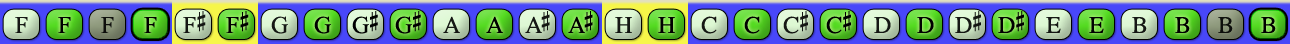
<style>
.page{position:relative;width:1290px;height:44px}
.page>*{position:absolute;margin:0}
.t1{font:24px "OpusChords";color:#000000}
.t2{font:24px "OpusChords";letter-spacing:-0.025em;color:#000000}
.t3{font:24px "OpusChords";letter-spacing:-0.1em;color:#000000}
</style>
<div class="page">
<p class="t1" style="left:15px;top:17px;width:13px;height:16px;opacity:0.9">F</p>
<p class="t1" style="left:58px;top:17px;width:13px;height:16px">F</p>
<p class="t1" style="left:101px;top:17px;width:13px;height:16px;opacity:0.9">F</p>
<p class="t1" style="left:144px;top:17px;width:13px;height:16px">F</p>
<p class="t1" style="left:183px;top:11px;width:23px;height:22px;opacity:0.9">F#</p>
<p class="t1" style="left:226px;top:11px;width:23px;height:22px">F#</p>
<p class="t1" style="left:271px;top:16px;width:17px;height:18px;opacity:0.9">G</p>
<p class="t1" style="left:314px;top:16px;width:17px;height:18px">G</p>
<p class="t2" style="left:352px;top:11px;width:26px;height:23px">G#</p>
<p class="t2" style="left:395px;top:11px;width:26px;height:23px">G#</p>
<p class="t1" style="left:443px;top:16px;width:17px;height:17px;opacity:0.9">A</p>
<p class="t1" style="left:486px;top:16px;width:17px;height:17px">A</p>
<p class="t3" style="left:525px;top:11px;width:25px;height:22px;opacity:0.9">A#</p>
<p class="t3" style="left:568px;top:11px;width:25px;height:22px">A#</p>
<p class="t1" style="left:615px;top:17px;width:17px;height:16px;opacity:0.9">H</p>
<p class="t1" style="left:658px;top:17px;width:17px;height:16px">H</p>
<p class="t1" style="left:701px;top:16px;width:16px;height:18px;opacity:0.9">C</p>
<p class="t1" style="left:744px;top:16px;width:16px;height:18px">C</p>
<p class="t1" style="left:783px;top:11px;width:25px;height:23px;opacity:0.9">C#</p>
<p class="t1" style="left:826px;top:11px;width:25px;height:23px">C#</p>
<p class="t1" style="left:874px;top:17px;width:17px;height:16px;opacity:0.9">D</p>
<p class="t1" style="left:917px;top:17px;width:17px;height:16px">D</p>
<p class="t2" style="left:955px;top:11px;width:26px;height:22px;opacity:0.9">D#</p>
<p class="t2" style="left:998px;top:11px;width:26px;height:22px">D#</p>
<p class="t1" style="left:1046px;top:17px;width:15px;height:16px;opacity:0.9">E</p>
<p class="t1" style="left:1089px;top:17px;width:15px;height:16px">E</p>
<p class="t1" style="left:1132px;top:17px;width:15px;height:16px;opacity:0.9">B</p>
<p class="t1" style="left:1175px;top:17px;width:15px;height:16px">B</p>
<p class="t1" style="left:1218px;top:17px;width:15px;height:16px;opacity:0.9">B</p>
<p class="t1" style="left:1261px;top:17px;width:15px;height:16px">B</p>
</div>
